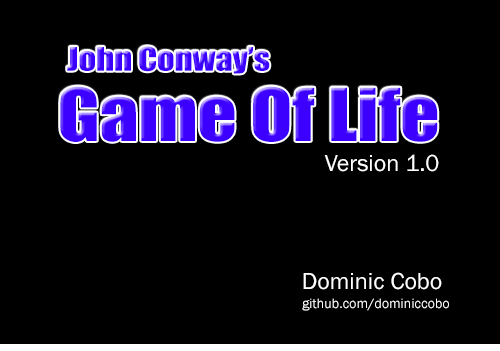
<style>
.page{position:relative;width:500px;height:351px;background:#000000}
.page>*{position:absolute;margin:0}
.t1{font:30px "Impact";color:#3c00ff;scale:1.14 1}
.t2{font:67.1px "Impact";color:#3c00ff;scale:1.14 1}
.t3{font:24px "FranklinGothic-Book";color:#ffffff}
.t4{font:14px "FranklinGothic-Book";color:#ffffff}
</style>
<div class="page">
<p class="t1" style="left:67px;top:46px;width:203px;height:28px">John Conway’s</p>
<p class="t2" style="left:60px;top:86px;width:378px;height:56px">Game Of Life</p>
<p class="t3" style="left:324px;top:154px;width:115px;height:18px">Version 1.0</p>
<p class="t3" style="left:303px;top:272px;width:139px;height:18px">Dominic Cobo</p>
<p class="t4" style="left:302px;top:298px;width:147px;height:13px">github.com/dominiccobo</p>
</div>
